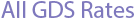
<style>
.page{position:relative;width:135px;height:19px;background:#ffffff}
.page>*{position:absolute;margin:0}
.t1{font:24px "MyriadPro-Regular";color:#7e78bd}
</style>
<div class="page">
<p class="t1" style="left:1px;top:1px;width:133px;height:17px">All GDS Rates</p>
</div>
